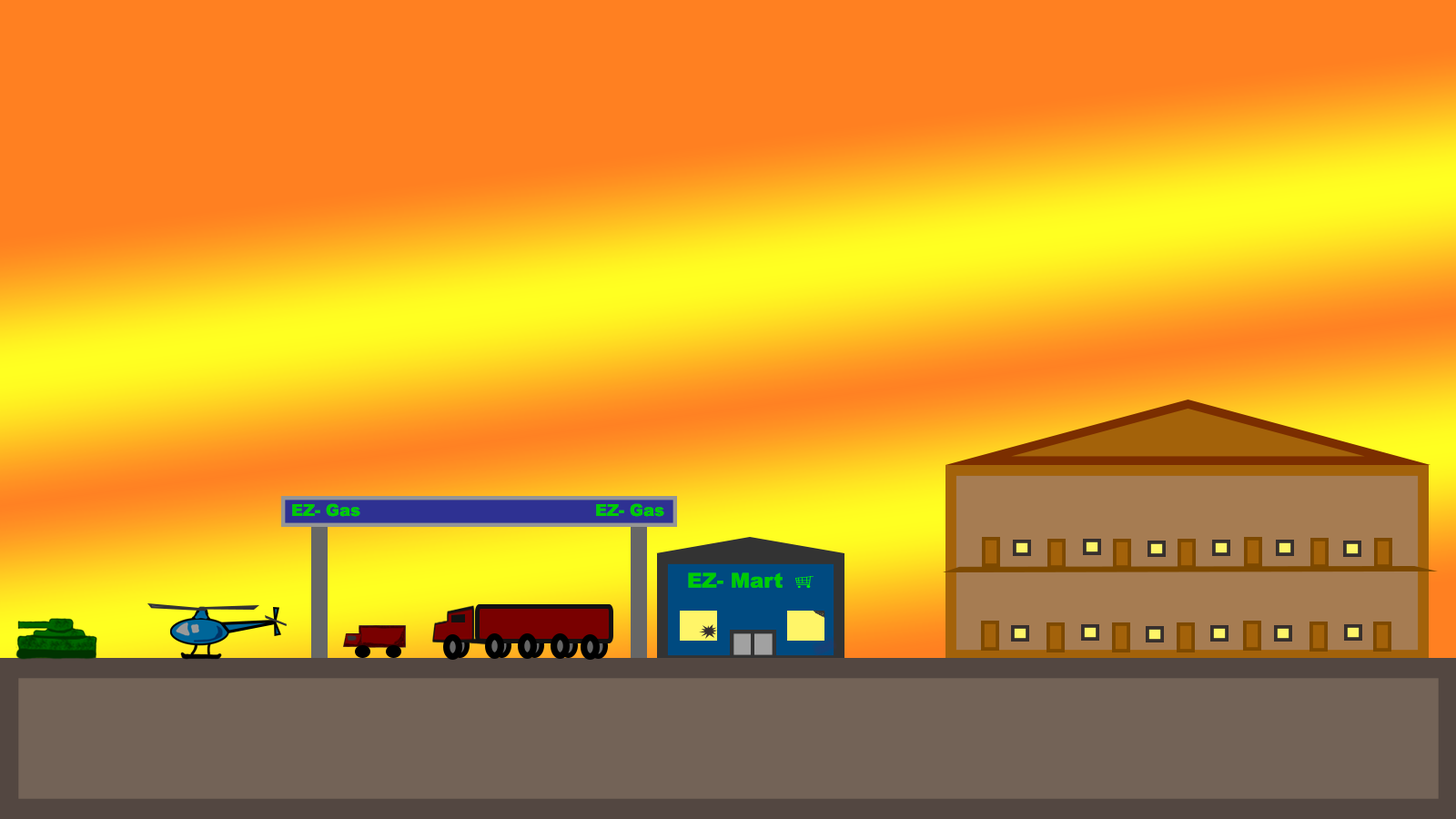
<style>
.page{position:relative;width:1456px;height:819px}
.page>*{position:absolute;margin:0}
.t1{font:16.4px "Arial-Black";color:#00cc00}
.t2{font:20.2px "Arial-Black";color:#00cc00}
</style>
<div class="page">
<p class="t1" style="left:292px;top:503px;width:68px;height:14px">EZ- Gas</p>
<p class="t1" style="left:596px;top:503px;width:68px;height:14px">EZ- Gas</p>
<p class="t2" style="left:688px;top:572px;width:95px;height:16px">EZ- Mart</p>
</div>
